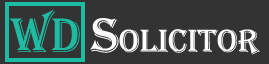
<style>
.page{position:relative;width:269px;height:64px;background:#333333}
.page>*{position:absolute;margin:0}
.t1{font:33.3px "Algerian";color:#fefefe}
.t2{font:50px "Algerian";color:#1ebba3}
.t3{font:50px "Algerian";color:#fefefe}
</style>
<div class="page">
<p class="t1" style="left:9px;top:9px;width:251px;height:46px"><span class="t2">WD </span><span class="t3">S</span>olicitor</p>
</div>
